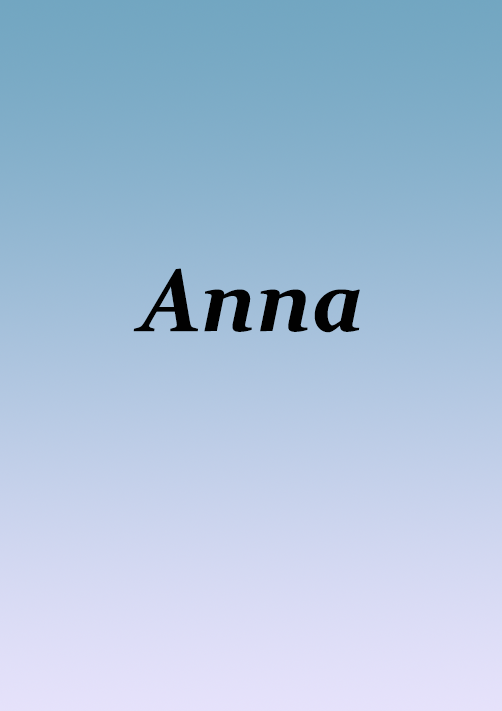
<style>
.page{position:relative;width:502px;height:711px}
.page>*{position:absolute;margin:0}
.t1{font:90px "Constantia-BoldItalic";color:#010101}
</style>
<div class="page">
<p class="t1" style="left:133px;top:268px;width:227px;height:65px">Anna</p>
</div>
